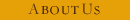
<style>
.page{position:relative;width:130px;height:20px;background:#e6a109}
.page>*{position:absolute;margin:0}
.t1{font:12.5px "Garamond";color:#4c290d}
.t2{font:16.7px "Garamond";color:#4c290d}
</style>
<div class="page">
<p class="t1" style="left:28px;top:3px;width:72px;height:12px"><span class="t2">A  </span>B O  U T <span class="t2">U </span>S</p>
</div>
